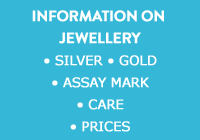
<style>
.page{position:relative;width:200px;height:140px;background:#35b8d7}
.page>*{position:absolute;margin:0}
.t1{font:15px/22px "BrandonGrotesque-Bold";letter-spacing:-0.02em;color:#ffffff;font-weight:bold}
.t2{font:13px/22px "Verdana";letter-spacing:-0.02em;color:#ffffff;font-weight:bold}
</style>
<div class="page">
<p class="t1" style="left:32px;top:10px;width:132px;height:34px;text-align:center">INFORMATION ON <br>JEWELLERY</p>
<p class="t2" style="left:44px;top:55px;width:113px;height:77px;text-align:center">• SILVER • GOLD<br>• ASSAY MARK<br>• CARE<br>• PRICES</p>
</div>
